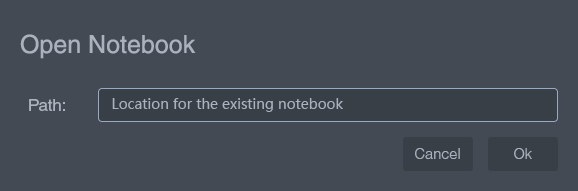
<style>
.page{position:relative;width:578px;height:191px;background:#434a54}
.page>*{position:absolute;margin:0}
.t1{font:25px "Helvetica";color:#aab2bd}
.t2{font:16.7px "Helvetica";color:#aab2bd}
.t3{font:14px "MicrosoftYaHei";color:#aab2bd}
.t4{font:14.6px "HelveticaLight";color:#aab2bd}
</style>
<div class="page">
<p class="t1" style="left:20px;top:34px;width:176px;height:25px">Open Notebook</p>
<p class="t2" style="left:29px;top:99px;width:36px;height:12px">Path:</p>
<p class="t3" style="left:112px;top:98px;width:231px;height:14px">Location for the existing notebook</p>
<p class="t4" style="left:415px;top:148px;width:45px;height:11px">Cancel</p>
<p class="t4" style="left:514px;top:148px;width:18px;height:11px">Ok</p>
</div>
